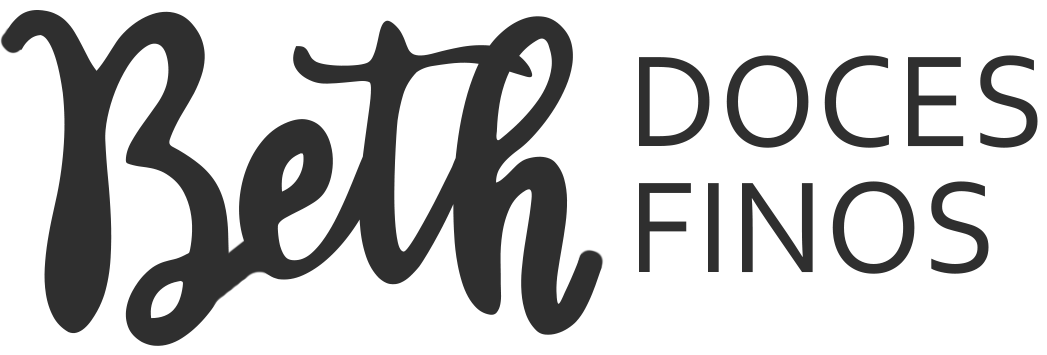
<style>
.page{position:relative;width:1047px;height:355px;background:#ffffff}
.page>*{position:absolute;margin:0}
.t1{font:136.2px/166.8px "Corbel";letter-spacing:0.01em;color:#2f2f2f}
.t2{font:136.2px/126.3px "Corbel";letter-spacing:0.01em;color:#2f2f2f}
</style>
<div class="page">
<p class="t1" style="left:639px;top:55px;width:399px;height:219px">DOCES<br><span class="t2">FINOS</span></p>
</div>
